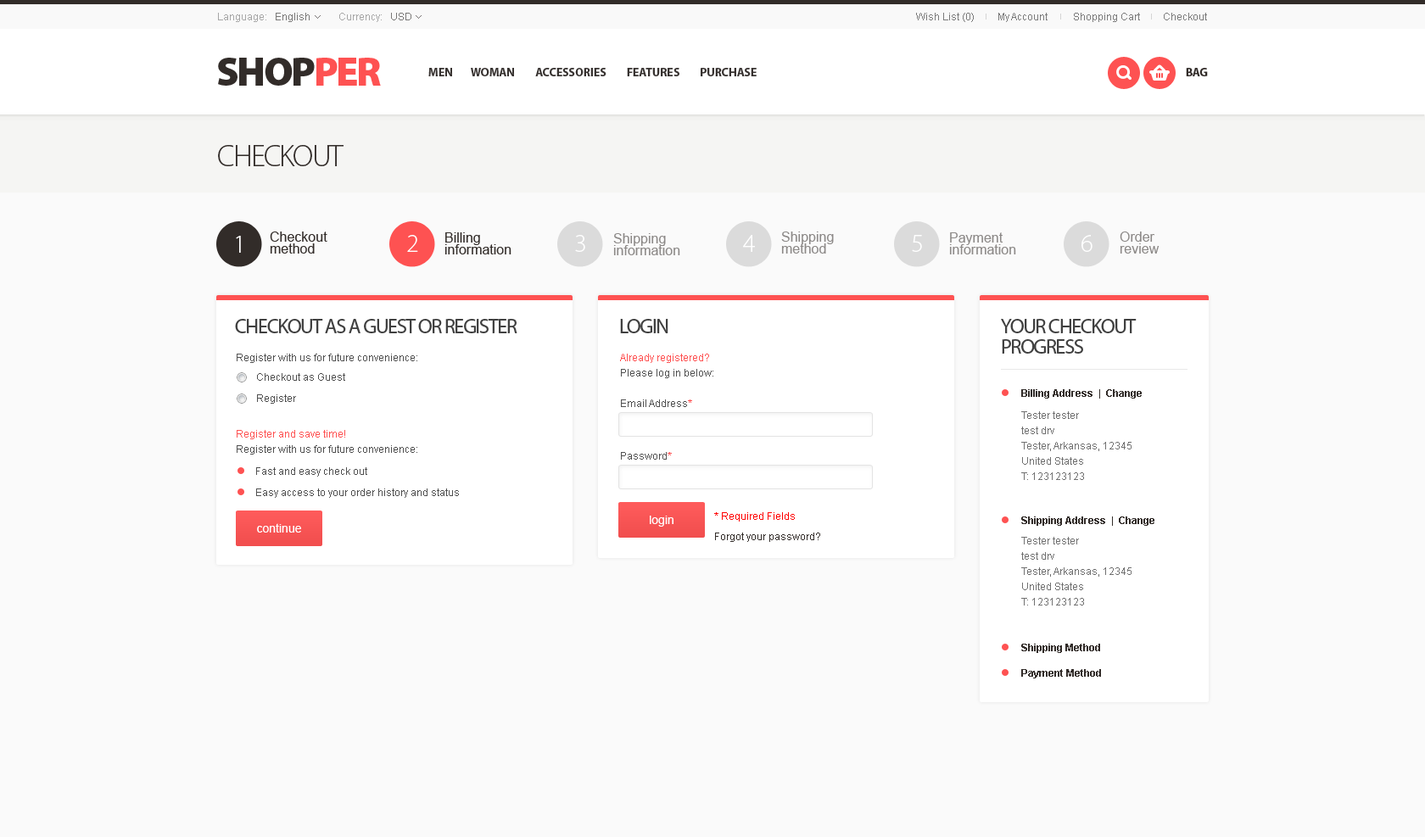
<style>
.page{position:relative;width:1425px;height:837px;background:#fafafa}
.page>*{position:absolute;margin:0}
.t1{font:30.5px "MyriadPro-Light";letter-spacing:-0.05em;color:#322c29;text-transform:uppercase}
.t2{font:13.6px/11.9px "ArialMT";color:#322c29}
.t3{font:13.6px/11.9px "ArialMT";color:#8c8987}
.t4{font:25.4px "MyriadPro-Light";letter-spacing:-0.05em;color:#ffffff;text-transform:uppercase}
.t5{font:20.4px "MyriadPro-Regular";letter-spacing:-0.05em;color:#404040;text-transform:uppercase}
.t6{font:20.4px/20.4px "MyriadPro-Regular";letter-spacing:-0.05em;color:#404040;text-transform:uppercase}
.t7{font:10.2px/15.3px "ArialMT";color:#505050}
.t8{font:10.2px/15.3px "ArialMT";color:#fe5252}
.t9{font:10.2px/21.2px "ArialMT";color:#505050}
.t10{font:10.2px/25.4px "Arial-BoldMT";color:#322c29}
.t11{font:10.2px/15.3px "ArialMT";color:#707070}
.t12{font:11.9px "ArialMT";color:#ffffff}
.t13{font:10.2px/6.8px "ArialMT";color:#322c29}
.t14{font:10.2px/6.8px "ArialMT";color:#ff0000}
</style>
<div class="page">
<p class="t1" style="left:218px;top:145px;width:125px;height:21px">checkout</p>
<p class="t2" style="left:270px;top:232px;width:57px;height:22px">Checkout <br>method</p>
<p class="t2" style="left:444px;top:232px;width:67px;height:22px">Billing <br>information</p>
<p class="t3" style="left:613px;top:233px;width:67px;height:22px">Shipping <br>information</p>
<p class="t3" style="left:781px;top:232px;width:53px;height:22px">Shipping <br>method</p>
<p class="t3" style="left:949px;top:232px;width:67px;height:22px">Payment <br>information</p>
<p class="t3" style="left:1119px;top:232px;width:40px;height:22px">Order <br>review</p>
<p class="t4" style="left:236px;top:236px;width:5px;height:17px">1</p>
<p class="t4" style="left:407px;top:235px;width:11px;height:17px">2</p>
<p class="t4" style="left:575px;top:235px;width:10px;height:17px">3</p>
<p class="t4" style="left:743px;top:235px;width:12px;height:17px">4</p>
<p class="t4" style="left:912px;top:235px;width:10px;height:17px">5</p>
<p class="t4" style="left:1081px;top:235px;width:11px;height:17px">6</p>
<p class="t5" style="left:235px;top:319px;width:282px;height:14px">Checkout as a Guest or Register</p>
<p class="t5" style="left:620px;top:319px;width:48px;height:14px">login</p>
<p class="t6" style="left:1001px;top:319px;width:135px;height:35px">Your Checkout Progress</p>
<p class="t7" style="left:237px;top:354px;width:180px;height:101px">Register with us for future convenience:<br><br><br><br><br><span class="t8">Register and save time!<br></span>Register with us for future convenience:</p>
<p class="t7" style="left:620px;top:354px;width:93px;height:106px"><span class="t8">Already registered?<br></span>Please log in below:<br><br>Email Address<span class="t8">*<br><br><br></span><br>Password<span class="t8">*</span></p>
<p class="t9" style="left:257px;top:373px;width:88px;height:31px">Checkout as Guest<br>Register</p>
<p class="t10" style="left:1021px;top:389px;width:133px;height:289px">Billing Address  |  Change<br><br><br><br><br>Shipping Address  |  Change<br><br><br><br><br>Shipping Method<br>Payment Method</p>
<p class="t11" style="left:1021px;top:411px;width:110px;height:69px">Tester tester<br>test drv<br>Tester, Arkansas, 12345<br>United States<br>T: 123123123</p>
<p class="t9" style="left:256px;top:467px;width:203px;height:31px">Fast and easy check out<br>Easy access to your order history and status</p>
<p class="t12" style="left:650px;top:516px;width:23px;height:11px">login</p>
<p class="t13" style="left:714px;top:512px;width:106px;height:30px"><span class="t14">* Required Fields  <br><br><br></span>Forgot your password?</p>
<p class="t12" style="left:257px;top:523px;width:44px;height:10px">continue</p>
<p class="t11" style="left:1021px;top:537px;width:110px;height:68px">Tester tester<br>test drv<br>Tester, Arkansas, 12345<br>United States<br>T: 123123123</p>
</div>
